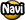
<style>
.page{position:relative;width:25px;height:20px;background:#ffffff}
.page>*{position:absolute;margin:0}
.t1{font:10.6px "Hodo";color:#ffffff}
.t2{font:10.6px "Hodo";color:#ffffff;font-variant:small-caps}
</style>
<div class="page">
<p class="t1" style="left:2px;top:4px;width:21px;height:10px"><span class="t2">N</span>avi</p>
</div>
